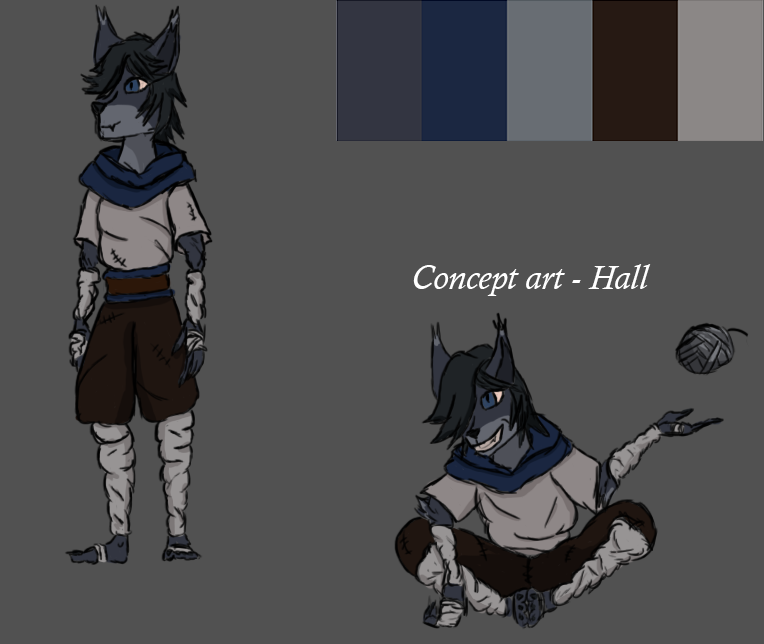
<style>
.page{position:relative;width:764px;height:644px;background:#515151}
.page>*{position:absolute;margin:0}
.t1{font:34.6px "CalistoMT-Italic";color:#ffffff}
</style>
<div class="page">
<p class="t1" style="left:413px;top:264px;width:238px;height:32px">Concept art - Hall</p>
</div>
